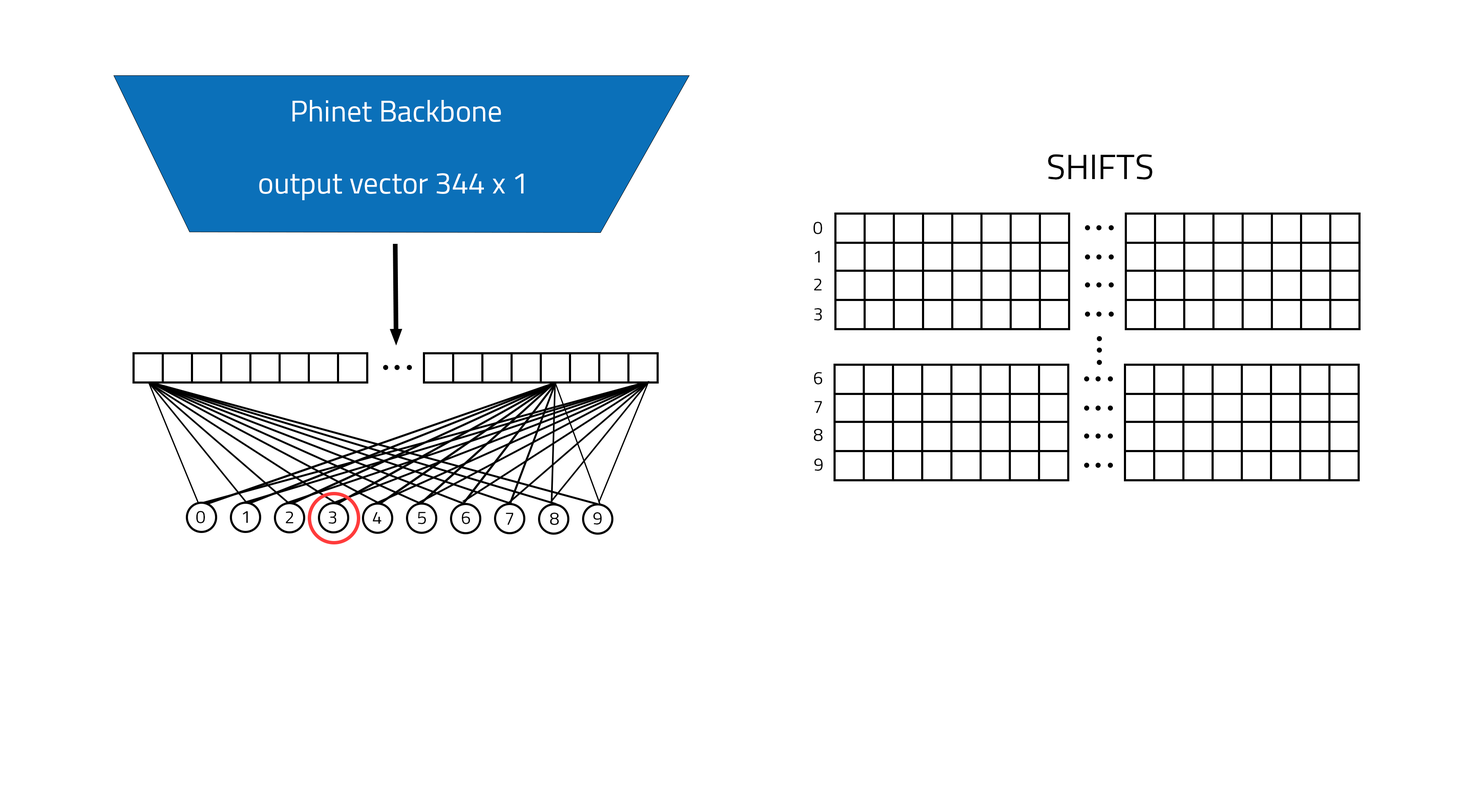
<style>
.page{position:relative;width:1474px;height:809px;background:#ffffff}
.page>*{position:absolute;margin:0}
.t1{font:30px "Titillium-Regular";color:#ffffff}
.t2{font:35.3px "Titillium-Regular";color:#000000}
.t3{font:17.6px "Titillium-Regular";color:#000000}
</style>
<div class="page">
<p class="t1" style="left:259px;top:100px;width:265px;height:100px;text-align:center">Phinet Backbone<br><br>output vector 344 x 1</p>
<p class="t2" style="left:1048px;top:154px;width:104px;height:25px">SHIFTS</p>
<p class="t3" style="left:813px;top:222px;width:9px;height:12px">0</p>
<p class="t3" style="left:814px;top:251px;width:6px;height:11px">1</p>
<p class="t3" style="left:814px;top:279px;width:8px;height:11px">2</p>
<p class="t3" style="left:814px;top:308px;width:8px;height:12px">3</p>
<p class="t3" style="left:814px;top:372px;width:9px;height:12px">6</p>
<p class="t3" style="left:814px;top:401px;width:8px;height:12px">7</p>
<p class="t3" style="left:814px;top:429px;width:9px;height:12px">8</p>
<p class="t3" style="left:814px;top:458px;width:9px;height:13px">9</p>
<p class="t3" style="left:196px;top:511px;width:9px;height:12px">0</p>
<p class="t3" style="left:243px;top:511px;width:5px;height:12px">1</p>
<p class="t3" style="left:286px;top:511px;width:7px;height:12px">2</p>
<p class="t3" style="left:328px;top:511px;width:9px;height:13px">3</p>
<p class="t3" style="left:373px;top:512px;width:8px;height:12px">4</p>
<p class="t3" style="left:418px;top:512px;width:8px;height:12px">5</p>
<p class="t3" style="left:462px;top:512px;width:8px;height:12px">6</p>
<p class="t3" style="left:506px;top:513px;width:7px;height:12px">7</p>
<p class="t3" style="left:550px;top:513px;width:9px;height:12px">8</p>
<p class="t3" style="left:593px;top:512px;width:9px;height:12px">9</p>
</div>
